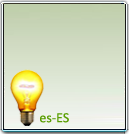
<style>
.page{position:relative;width:130px;height:134px}
.page>*{position:absolute;margin:0}
.t1{font:14px "Calibri";color:#589e00}
</style>
<div class="page">
<p class="t1" style="left:40px;top:113px;width:29px;height:10px">es-ES</p>
</div>
